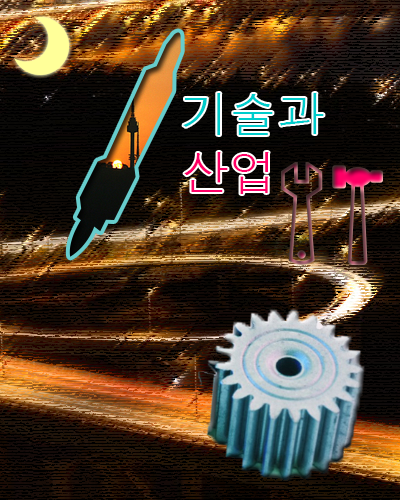
<style>
.page{position:relative;width:400px;height:500px}
.page>*{position:absolute;margin:0}
.t1{font:48px "Dotum";color:#00cccc}
.t2{font:48px "Dotum";color:#ff0066}
</style>
<div class="page">
<p class="t1" style="left:183px;top:93px;width:141px;height:101px">기술과<br><span class="t2">산업</span></p>
</div>
